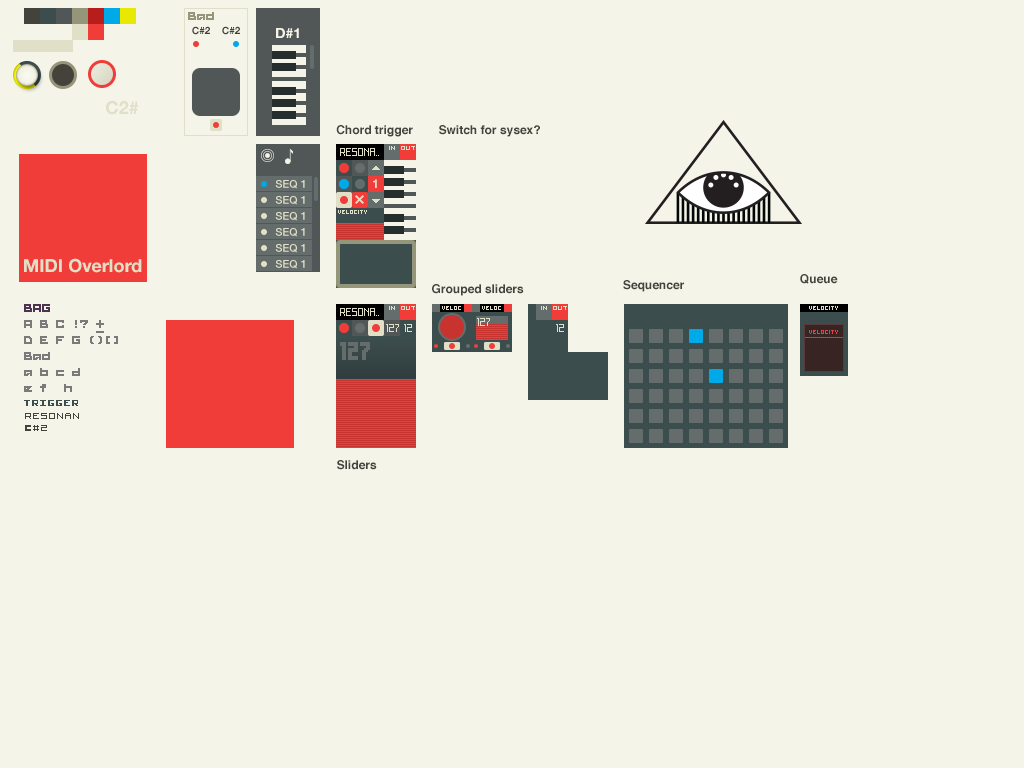
<style>
.page{position:relative;width:1024px;height:768px;background:#f4f4e9}
.page>*{position:absolute;margin:0}
.t1{font:10px "HelveticaNeue-Bold";color:#43433c}
.t2{font:14px "HelveticaNeue-Bold";color:#f4f4e9}
.t3{font:18px "HelveticaNeue-Bold";color:#e0e0c9}
.t4{font:12px "Helvetica-Bold";color:#43433c}
.t5{font:11px "HelveticaNeue-Medium";color:#e0e0c9}
</style>
<div class="page">
<p class="t1" style="left:192px;top:26px;width:18px;height:9px">C#2</p>
<p class="t1" style="left:222px;top:26px;width:18px;height:9px">C#2</p>
<p class="t2" style="left:276px;top:28px;width:23px;height:10px">D#1</p>
<p class="t3" style="left:106px;top:100px;width:33px;height:15px">C2#</p>
<p class="t4" style="left:336px;top:125px;width:77px;height:12px">Chord trigger</p>
<p class="t4" style="left:439px;top:125px;width:101px;height:12px">Switch for sysex?</p>
<p class="t5" style="left:275px;top:180px;width:30px;height:9px">SEQ 1</p>
<p class="t5" style="left:275px;top:196px;width:30px;height:9px">SEQ 1</p>
<p class="t5" style="left:275px;top:212px;width:30px;height:9px">SEQ 1</p>
<p class="t5" style="left:275px;top:228px;width:30px;height:9px">SEQ 1</p>
<p class="t5" style="left:275px;top:244px;width:30px;height:9px">SEQ 1</p>
<p class="t3" style="left:24px;top:258px;width:118px;height:15px">MIDI Overlord</p>
<p class="t5" style="left:275px;top:260px;width:30px;height:9px">SEQ 1</p>
<p class="t4" style="left:623px;top:280px;width:61px;height:12px">Sequencer</p>
<p class="t4" style="left:800px;top:274px;width:38px;height:10px">Queue</p>
<p class="t4" style="left:432px;top:284px;width:92px;height:12px">Grouped sliders</p>
<p class="t4" style="left:337px;top:460px;width:40px;height:10px">Sliders</p>
</div>
